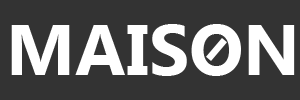
<style>
.page{position:relative;width:300px;height:100px;background:#333333}
.page>*{position:absolute;margin:0}
.t1{font:72px "Gadugi-Bold";color:#ffffff}
</style>
<div class="page">
<p class="t1" style="left:11px;top:24px;width:284px;height:52px">MAISON</p>
</div>
